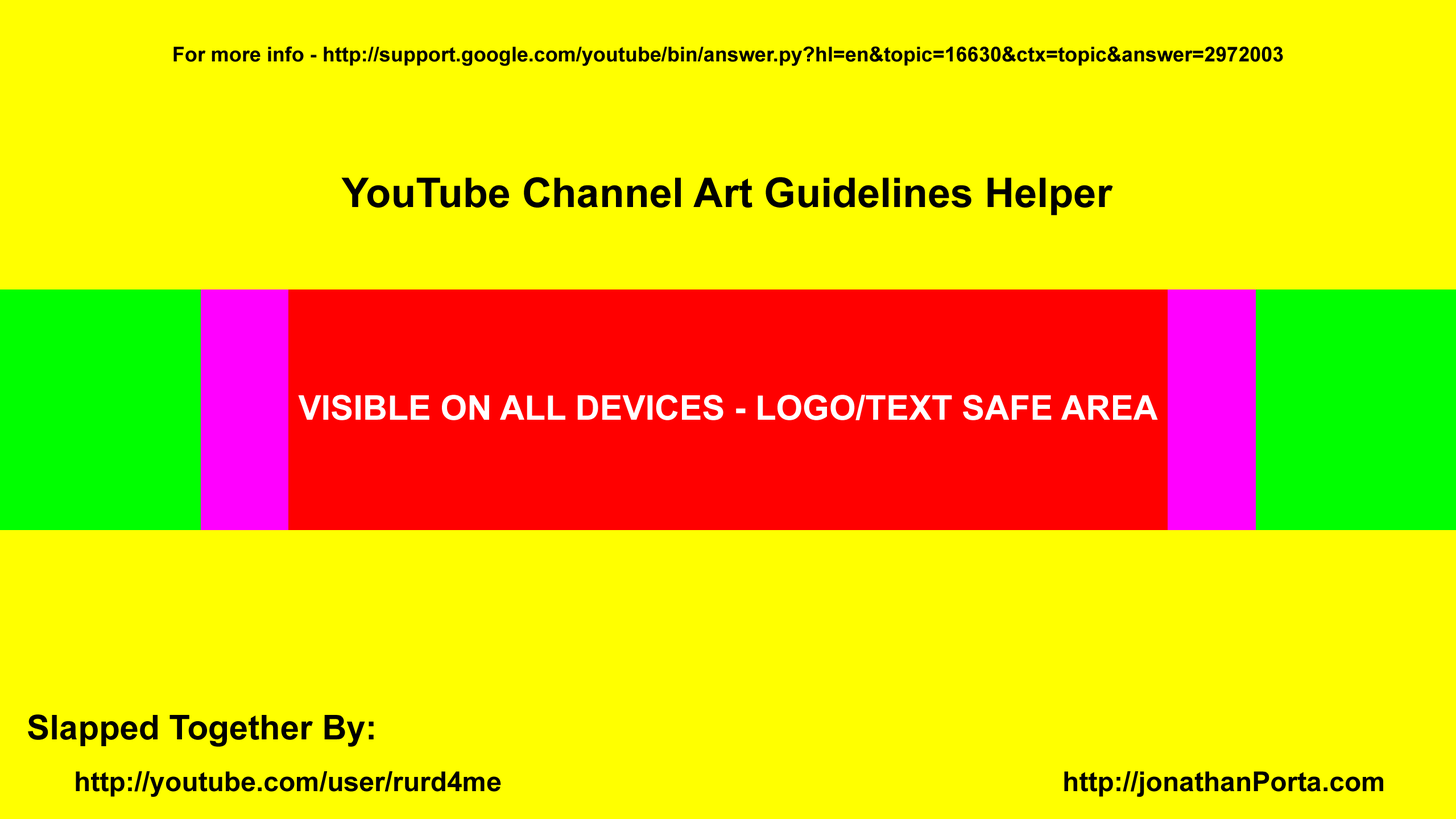
<style>
.page{position:relative;width:1456px;height:819px;background:#ffff00}
.page>*{position:absolute;margin:0}
.t1{font:20.5px "Arial-BoldMT";color:#000000}
.t2{font:40.9px "Arial-BoldMT";color:#000000}
.t3{font:34.1px "Arial-BoldMT";color:#ffffff}
.t4{font:34.1px "Arial-BoldMT";color:#000000}
.t5{font:27.3px "Arial-BoldMT";color:#000000}
</style>
<div class="page">
<p class="t1" style="left:173px;top:46px;width:1110px;height:20px">For more info - http://support.google.com/youtube/bin/answer.py?hl=en&amp;topic=16630&amp;ctx=topic&amp;answer=2972003</p>
<p class="t2" style="left:341px;top:177px;width:772px;height:39px">YouTube Channel Art Guidelines Helper</p>
<p class="t3" style="left:298px;top:395px;width:860px;height:25px">VISIBLE ON ALL DEVICES - LOGO/TEXT SAFE AREA</p>
<p class="t4" style="left:28px;top:714px;width:346px;height:33px">Slapped Together By:</p>
<p class="t5" style="left:76px;top:771px;width:425px;height:26px">http://youtube.com/user/rurd4me</p>
<p class="t5" style="left:1064px;top:771px;width:319px;height:26px">http://jonathanPorta.com</p>
</div>
